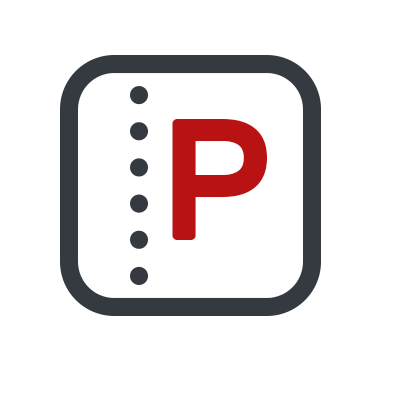
<style>
.page{position:relative;width:397px;height:397px;background:#ffffff}
.page>*{position:absolute;margin:0}
.t1{font:173.3px "Rubik-Medium";letter-spacing:-0.02em;color:#b81312;text-transform:uppercase}
</style>
<div class="page">
<p class="t1" style="left:172px;top:119px;width:96px;height:121px">P</p>
</div>
